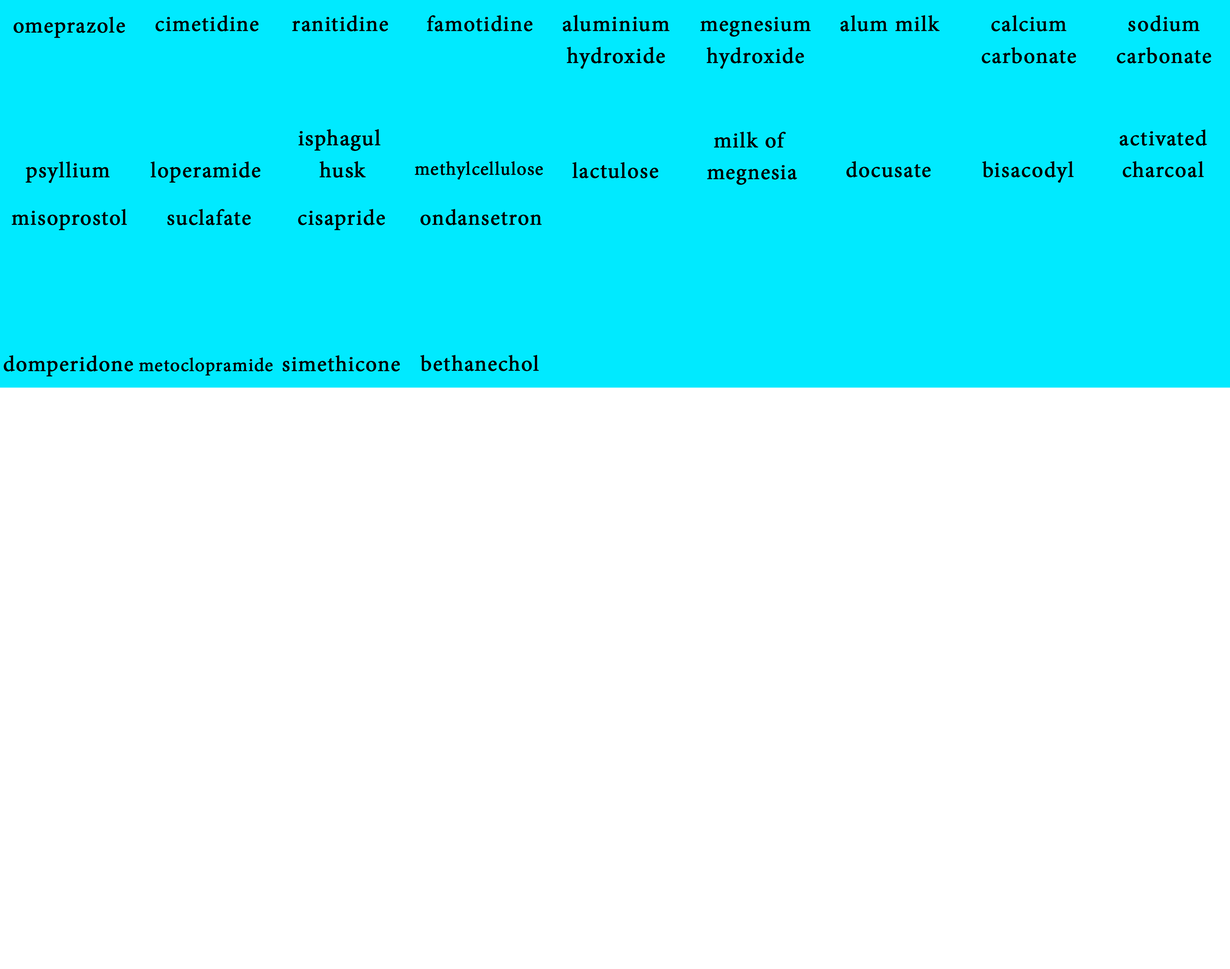
<style>
.page{position:relative;width:1230px;height:969px;background:#ffffff}
.page>*{position:absolute;margin:0}
.t1{font:26.5px "AdobeThai-Regular";letter-spacing:0.02em;color:#000000;font-weight:bold}
.t2{font:26.7px "AdobeThai-Regular";letter-spacing:0.02em;color:#000000;font-weight:bold}
.t3{font:22.4px "AdobeThai-Regular";letter-spacing:0.02em;color:#000000;font-weight:bold}
</style>
<div class="page">
<p class="t1" style="left:13px;top:17px;width:112px;height:21px">omeprazole</p>
<p class="t1" style="left:155px;top:15px;width:104px;height:16px">cimetidine</p>
<p class="t1" style="left:292px;top:15px;width:96px;height:16px">ranitidine</p>
<p class="t1" style="left:427px;top:15px;width:106px;height:16px">famotidine</p>
<p class="t2" style="left:563px;top:15px;width:107px;height:54px;text-align:center">aluminium<br>hydroxide</p>
<p class="t1" style="left:700px;top:17px;width:111px;height:52px;text-align:center">megnesium<br>hydroxide</p>
<p class="t1" style="left:841px;top:15px;width:99px;height:16px">alum milk</p>
<p class="t1" style="left:982px;top:15px;width:94px;height:48px;text-align:center">calcium<br>carbonate</p>
<p class="t1" style="left:1117px;top:15px;width:95px;height:48px;text-align:center">sodium<br>carbonate</p>
<p class="t2" style="left:299px;top:129px;width:82px;height:49px;text-align:center">isphagul<br> husk</p>
<p class="t1" style="left:707px;top:132px;width:90px;height:53px;text-align:center">milk of<br> megnesia</p>
<p class="t1" style="left:1120px;top:130px;width:87px;height:47px;text-align:center">activated<br>charcoal</p>
<p class="t1" style="left:25px;top:162px;width:85px;height:21px">psyllium</p>
<p class="t1" style="left:151px;top:162px;width:110px;height:21px">loperamide</p>
<p class="t3" style="left:415px;top:161px;width:128px;height:19px">methylcellulose</p>
<p class="t1" style="left:847px;top:161px;width:84px;height:16px">docusate</p>
<p class="t1" style="left:982px;top:161px;width:92px;height:22px">bisacodyl</p>
<p class="t1" style="left:573px;top:162px;width:86px;height:16px">lactulose</p>
<p class="t1" style="left:11px;top:209px;width:116px;height:21px">misoprostol</p>
<p class="t1" style="left:167px;top:209px;width:84px;height:16px">suclafate</p>
<p class="t1" style="left:298px;top:209px;width:87px;height:21px">cisapride</p>
<p class="t1" style="left:420px;top:209px;width:122px;height:16px">ondansetron</p>
<p class="t1" style="left:4px;top:355px;width:129px;height:22px">domperidone</p>
<p class="t3" style="left:139px;top:358px;width:134px;height:18px">metoclopramide</p>
<p class="t1" style="left:282px;top:355px;width:118px;height:17px">simethicone</p>
<p class="t1" style="left:420px;top:355px;width:119px;height:16px">bethanechol</p>
</div>
